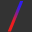
<style>
.page{position:relative;width:32px;height:32px;background:#333333}
.page>*{position:absolute;margin:0}
.t1{font:46.8px "EngraversGothicBT-Regular"}
</style>
<div class="page">
<p class="t1" style="left:7px;top:1px;width:16px;height:31px">/</p>
</div>
